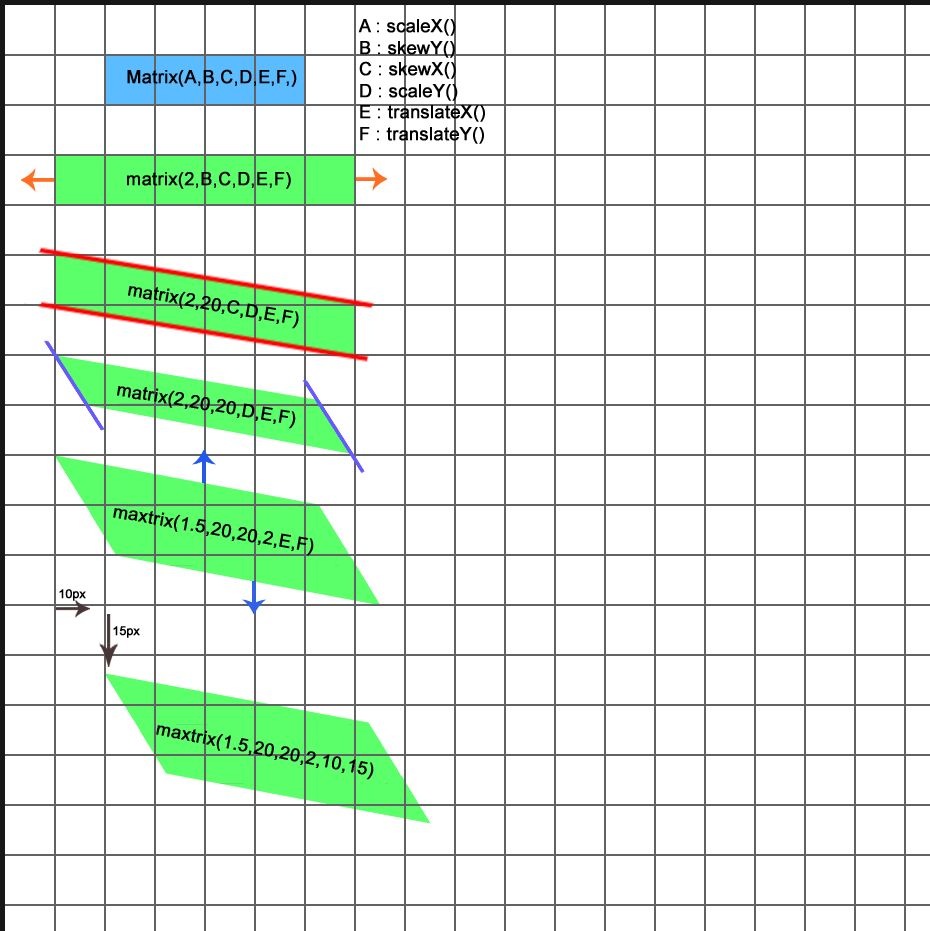
<style>
.page{position:relative;width:930px;height:931px;background:#ffffff}
.page>*{position:absolute;margin:0}
.t1{font:17.9px "ArialMT";color:#000000;font-weight:bold}
.t2{font:12px "ArialMT";color:#000000;font-weight:bold}
</style>
<div class="page">
<p class="t1" style="left:358px;top:19px;width:127px;height:125px">A : scaleX()<br>B : skewY()<br>C : skewX()<br>D : scaleY()<br>E : translateX()<br>F : translateY()</p>
<p class="t1" style="left:127px;top:69px;width:170px;height:18px">Matrix(A,B,C,D,E,F,)</p>
<p class="t1" style="left:127px;top:171px;width:164px;height:18px">matrix(2,B,C,D,E,F)</p>
<p class="t1" style="left:128px;top:286px;width:171px;height:43px;rotate:10deg">matrix(2,20,C,D,E,F)</p>
<p class="t1" style="left:117px;top:386px;width:179px;height:43px;rotate:9deg">matrix(2,20,20,D,E,F)</p>
<p class="t1" style="left:113px;top:508px;width:201px;height:48px;rotate:10deg">maxtrix(1.5,20,20,2,E,F)</p>
<p class="t2" style="left:59px;top:589px;width:27px;height:12px">10px</p>
<p class="t2" style="left:113px;top:626px;width:27px;height:12px">15px</p>
<p class="t1" style="left:156px;top:725px;width:218px;height:55px;rotate:11deg">maxtrix(1.5,20,20,2,10,15)</p>
</div>
